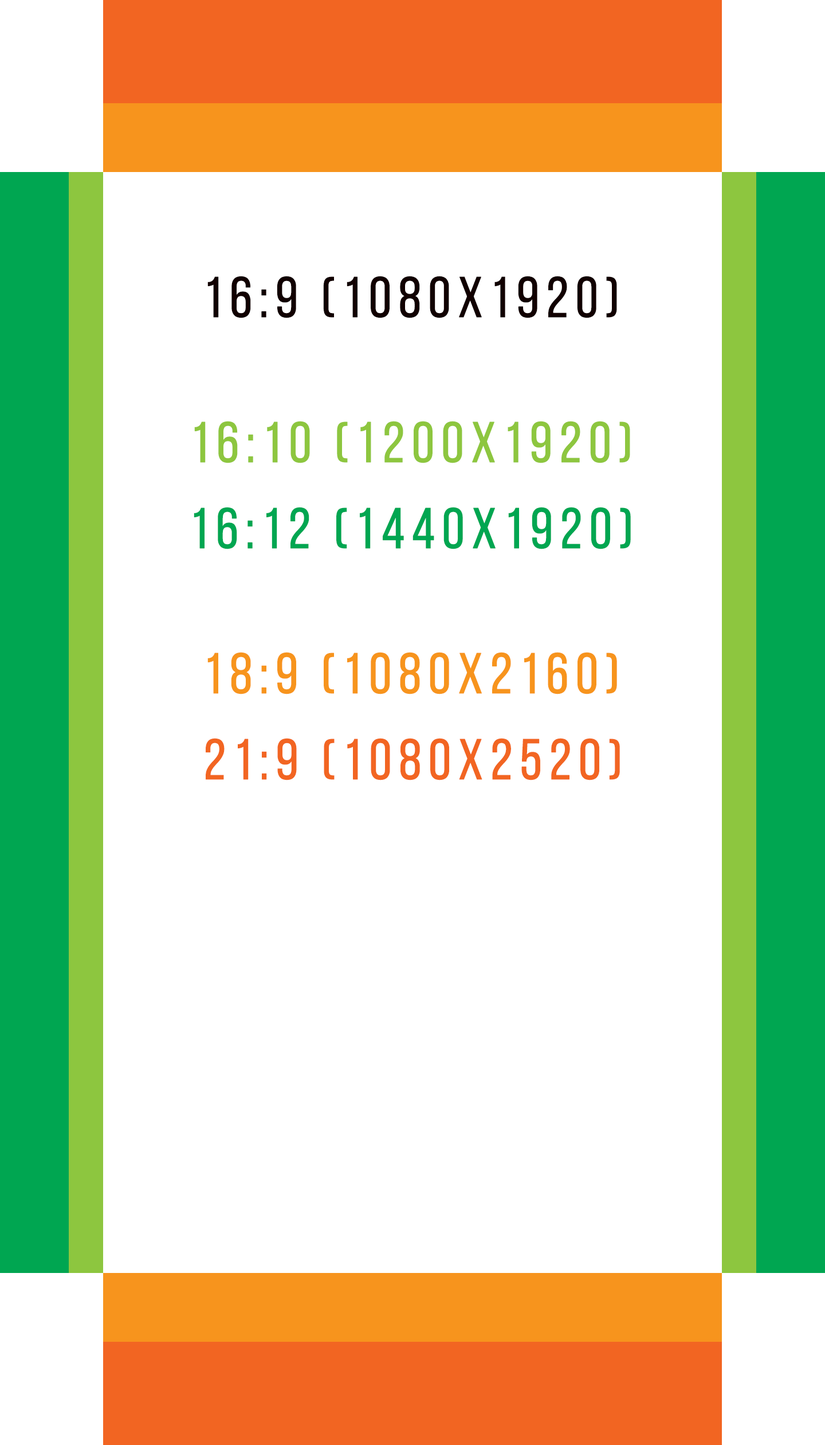
<style>
.page{position:relative;width:825px;height:1445px;background:#ffffff}
.page>*{position:absolute;margin:0}
.t1{font:57.3px "BebasNeueRegular";letter-spacing:0.1em;color:#110000;font-weight:bold}
.t2{font:57.3px "BebasNeueRegular";letter-spacing:0.1em;color:#8dc63f;font-weight:bold}
.t3{font:57.3px "BebasNeueRegular";letter-spacing:0.1em;color:#00a651;font-weight:bold}
.t4{font:57.3px "BebasNeueRegular";letter-spacing:0.1em;color:#f7941d;font-weight:bold}
.t5{font:57.3px "BebasNeueRegular";letter-spacing:0.1em;color:#f26522;font-weight:bold}
</style>
<div class="page">
<p class="t1" style="left:208px;top:276px;width:409px;height:42px">16:9 (1080x1920)</p>
<p class="t2" style="left:194px;top:421px;width:437px;height:42px">16:10 (1200x1920)</p>
<p class="t3" style="left:194px;top:507px;width:437px;height:42px">16:12 (1440x1920)</p>
<p class="t4" style="left:208px;top:652px;width:409px;height:42px">18:9 (1080x2160)</p>
<p class="t5" style="left:206px;top:738px;width:414px;height:42px">21:9 (1080x2520)</p>
</div>
